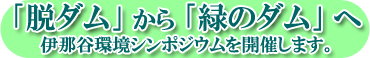
<style>
.page{position:relative;width:370px;height:58px;background:#99ff99}
.page>*{position:absolute;margin:0}
.t1{font:30px "HGPMinchoE";color:#006666}
.t2{font:24px "HGPMinchoE";color:#006666}
.t3{font:18px "HGPMinchoE";color:#006666}
</style>
<div class="page">
<p class="t1" style="left:15px;top:3px;width:346px;height:29px">｢脱ダム｣ <span class="t2">から</span> ｢緑のダム｣ へ</p>
<p class="t3" style="left:40px;top:36px;width:290px;height:17px">伊那谷環境シンポジウムを開催します。</p>
</div>
